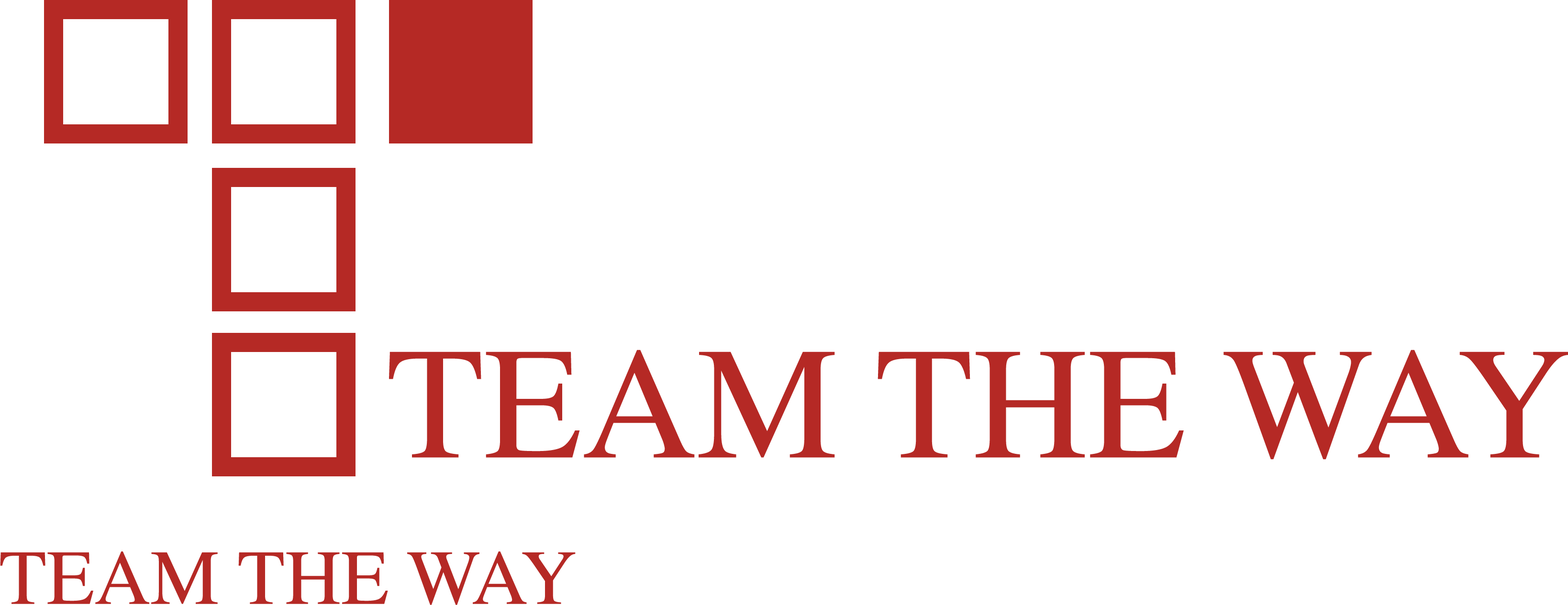
<style>
.page{position:relative;width:1568px;height:605px;background:#ffffff}
.page>*{position:absolute;margin:0}
.t1{font:159.5px "Times-Roman";color:#b52925}
.t2{font:77.8px "Times-Roman";color:#b52925}
</style>
<div class="page">
<p class="t1" style="left:389px;top:350px;width:1179px;height:110px">TEAM THE WAY</p>
<p class="t2" style="left:0px;top:552px;width:576px;height:53px">TEAM THE WAY</p>
</div>
